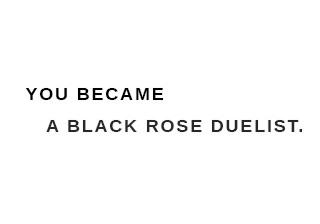
<style>
.page{position:relative;width:320px;height:224px;background:#ffffff}
.page>*{position:absolute;margin:0}
.t1{font:18px "LiberationSans-Bold";letter-spacing:0.1em;color:#000000}
.t2{font:18px "LiberationSans-Bold";letter-spacing:0.1em;color:#282828}
</style>
<div class="page">
<p class="t1" style="left:25px;top:88px;width:138px;height:12px">YOU BECAME</p>
<p class="t2" style="left:46px;top:120px;width:256px;height:12px">A BLACK ROSE DUELIST.</p>
</div>
